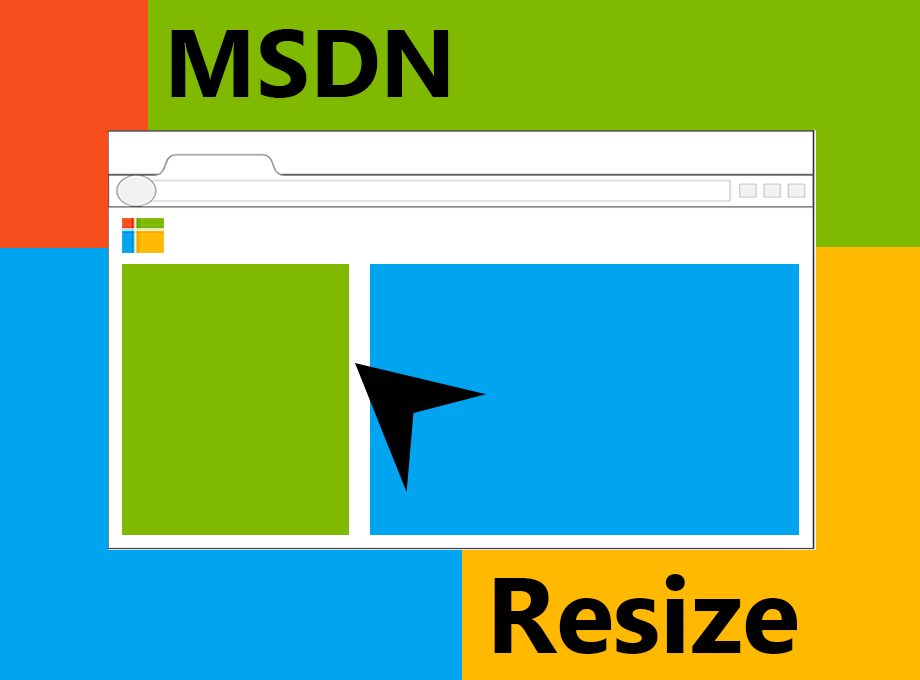
<style>
.page{position:relative;width:920px;height:680px;background:#00a4ef}
.page>*{position:absolute;margin:0}
.t1{font:96px "MicrosoftNewTaiLue-Bold";color:#000000}
.t2{font:106.7px "MicrosoftNewTaiLue-Bold";color:#000000}
</style>
<div class="page">
<p class="t1" style="left:171px;top:29px;width:278px;height:69px">MSDN</p>
<p class="t2" style="left:494px;top:574px;width:303px;height:80px">Resize</p>
</div>
